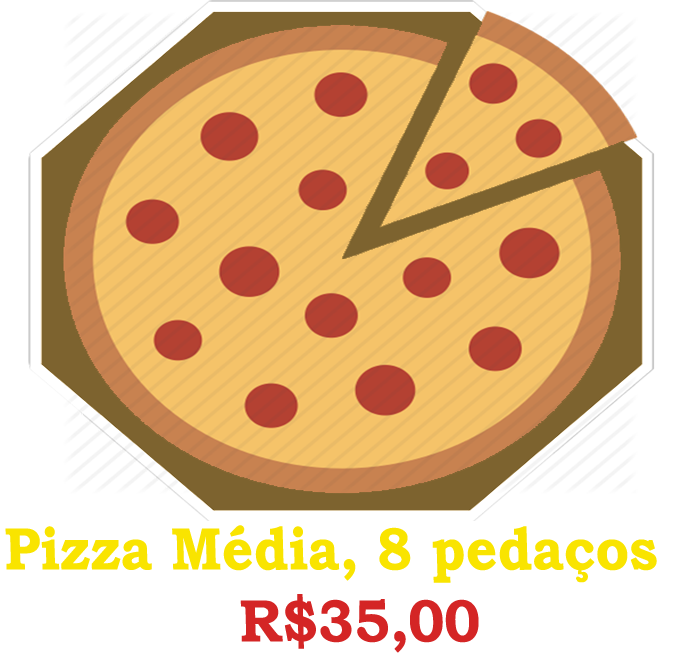
<style>
.page{position:relative;width:674px;height:660px;background:#ffffff}
.page>*{position:absolute;margin:0}
.t1{font:60px "BookmanOldStyle-Bold";color:#f9e400;scale:0.91 1}
.t2{font:47.4px "BookmanOldStyle-Bold";color:#dfd208;scale:0.91 1}
.t3{font:60px "BookmanOldStyle-Bold";color:#d42525;scale:0.91 1}
</style>
<div class="page">
<p class="t1" style="left:5px;top:525px;width:652px;height:128px;text-align:center"><span class="t2">               </span>Pizza Média, 8 pedaços<br><span class="t3">               R$35,00</span></p>
</div>
